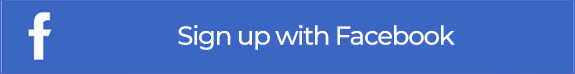
<style>
.page{position:relative;width:575px;height:74px;background:#3c66c4}
.page>*{position:absolute;margin:0}
.t1{font:26px "Montserrat-Medium";letter-spacing:-0.05em;color:#ffffff}
</style>
<div class="page">
<p class="t1" style="left:178px;top:25px;width:277px;height:25px">Sign up with Facebook</p>
</div>
